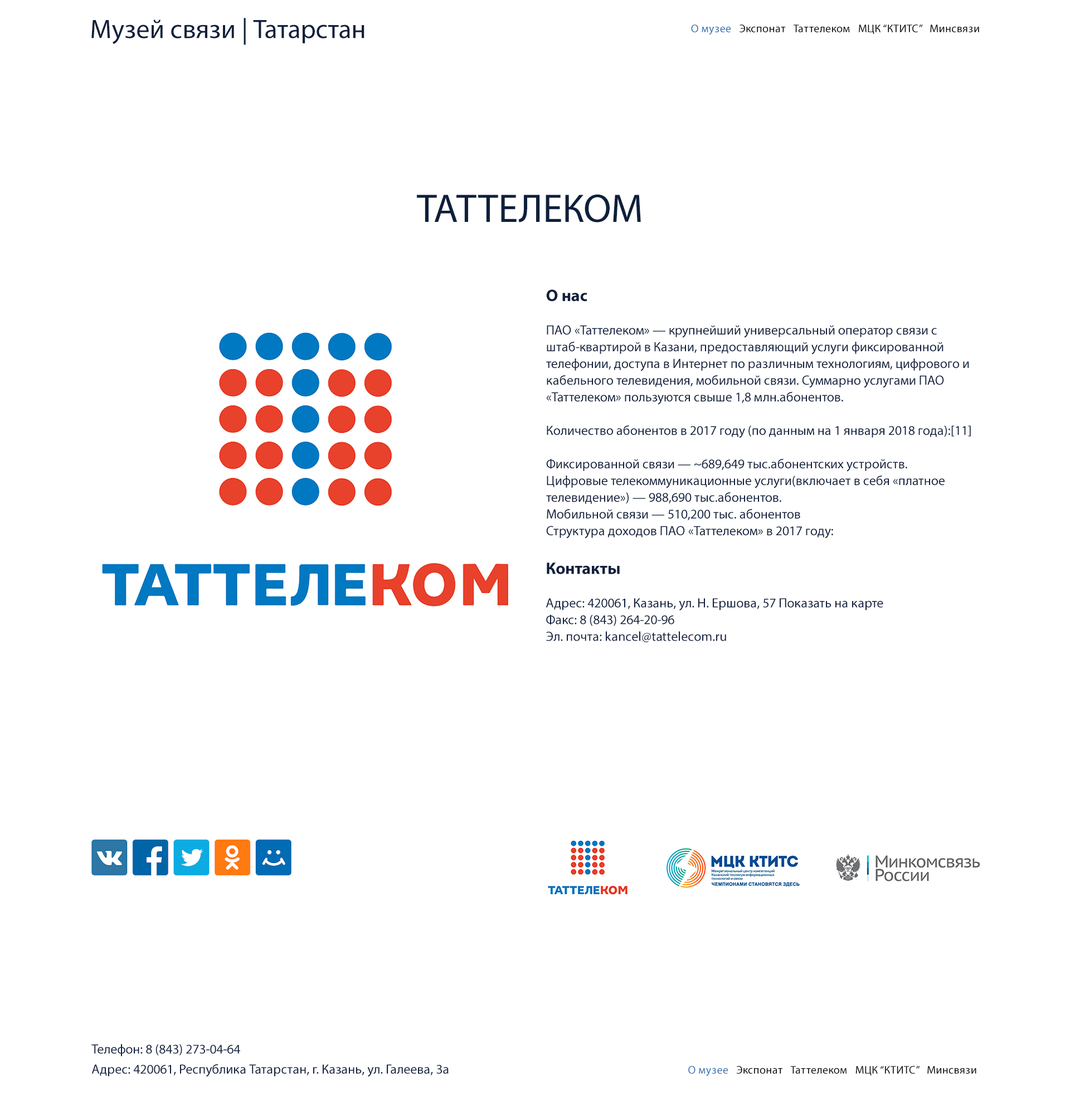
<style>
.page{position:relative;width:1070px;height:1115px;background:#ffffff}
.page>*{position:absolute;margin:0}
.t1{font:26.7px "MyriadPro-Regular";color:#0f1f3c}
.t2{font:11.1px "MyriadPro-Regular";letter-spacing:0.02em;color:#000000}
.t3{font:11.1px "MyriadPro-Regular";letter-spacing:0.02em;color:#356eaf}
.t4{font:40.1px "MyriadPro-Regular";color:#0f1f3c}
.t5{font:13.4px/16.7px "MyriadPro-Regular";color:#0f1f3c}
.t6{font:16.7px/16.7px "MyriadPro-Bold";color:#0f1f3c}
.t7{font:13.4px/20.1px "MyriadPro-Regular";color:#0f1f3c}
.t8{font:11.1px "MyriadPro-Regular";letter-spacing:0.02em;color:#040404}
</style>
<div class="page">
<p class="t1" style="left:91px;top:18px;width:273px;height:27px">Музей связи | Татарстан</p>
<p class="t2" style="left:691px;top:25px;width:288px;height:10px"><span class="t3">О музее </span>Экспонат Таттелеком МЦК “КТИТС” Минсвязи</p>
<p class="t4" style="left:417px;top:194px;width:224px;height:28px">ТАТТЕЛЕКОМ</p>
<p class="t5" style="left:546px;top:289px;width:425px;height:249px"><span class="t6">О нас<br></span><br>ПАО «Таттелеком» — крупнейший универсальный оператор связи с штаб-квартирой в Казани, предоставляющий услуги фиксированной телефонии, доступа в Интернет по различным технологиям, цифрового и кабельного телевидения, мобильной связи. Суммарно услугами ПАО «Таттелеком» пользуются свыше 1,8 млн.абонентов.<br><br>Количество абонентов в 2017 году (по данным на 1 января 2018 года):[11]<br><br>Фиксированной связи — ~689,649 тыс.абонентских устройств.<br>Цифровые телекоммуникационные услуги(включает в себя «платное телевидение») — 988,690 тыс.абонентов.<br>Мобильной связи — 510,200 тыс. абонентов<br>Структура доходов ПАО «Таттелеком» в 2017 году:<br><br>Цифровые телекоммуникационные услуги — 51 %<br>Телефонная связь — 29 %<br>Услуги пропуска трафика — 4 %<br>Аренда инфраструктуры — 8 %<br>Прочие услуги — 8 %<br>Количество базовых станций сотовой связи к концу 2017 года составило более 2500 шт. на территории Республики Татарстан. Доля ПАО «Таттелеком» фиксированной телефонной связи составляет 78 %.<br><br><br>Контакты:<br><br>Адрес: 420061, Казань, ул. Н. Ершова, 57 Показать на карте<br>Факс: 8 (843) 264-20-96<br>Эл. почта: kancel@tattelecom.ru</p>
<p class="t5" style="left:546px;top:562px;width:337px;height:80px"><span class="t6">Контакты<br></span><br>Адрес: 420061, Казань, ул. Н. Ершова, 57 Показать на карте<br>Факс: 8 (843) 264-20-96<br>Эл. почта: kancel@tattelecom.ru</p>
<p class="t7" style="left:91px;top:1043px;width:358px;height:34px">Телефон: 8 (843) 273-04-64<br>Адрес: 420061, Республика Татарстан, г. Казань, ул. Галеева, 3а</p>
<p class="t8" style="left:688px;top:1065px;width:288px;height:10px"><span class="t3">О музее </span>Экспонат Таттелеком МЦК “КТИТС” Минсвязи</p>
</div>
